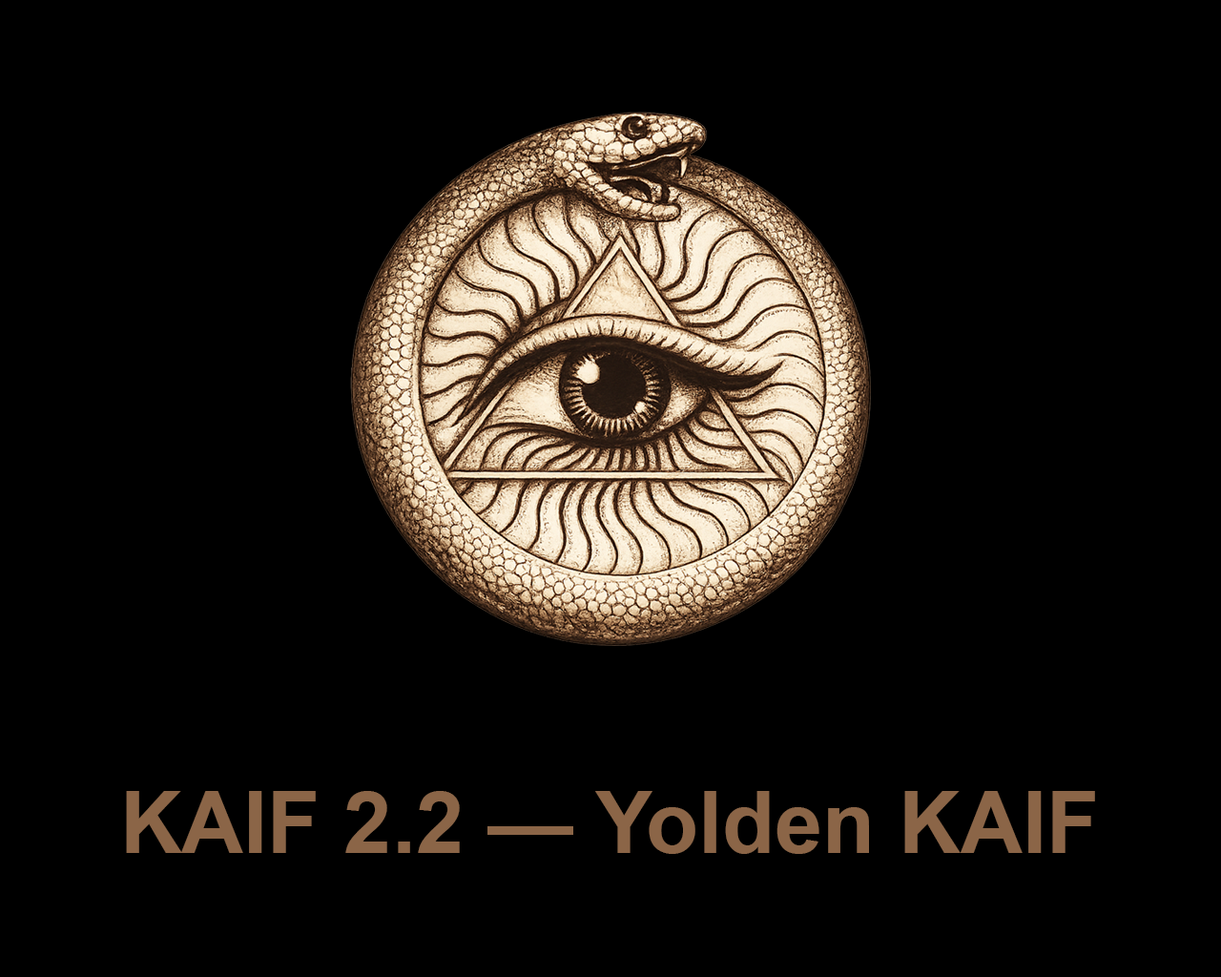
<style>
.page{position:relative;width:1221px;height:977px;background:#000000}
.page>*{position:absolute;margin:0}
.t1{font:85.8px "Arial-BoldMT";color:#8b6547}
</style>
<div class="page">
<p class="t1" style="left:126px;top:791px;width:969px;height:63px">KAIF 2.2 — Yolden KAIF</p>
</div>
